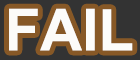
<style>
.page{position:relative;width:140px;height:60px;background:#333333}
.page>*{position:absolute;margin:0}
.t1{font:58px "Arial-BoldMT";color:#ffffff}
</style>
<div class="page">
<p class="t1" style="left:9px;top:8px;width:124px;height:43px">FAIL</p>
</div>
